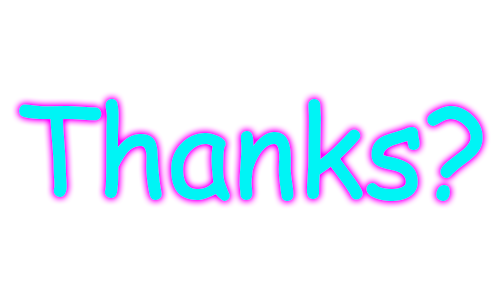
<style>
.page{position:relative;width:500px;height:300px;background:#ffffff}
.page>*{position:absolute;margin:0}
.t1{font:125px "ComicSansMS";letter-spacing:-0.004em;color:#00f4f5}
</style>
<div class="page">
<p class="t1" style="left:19px;top:99px;width:464px;height:102px">Thanks?</p>
</div>
